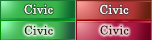
<style>
.page{position:relative;width:152px;height:40px}
.page>*{position:absolute;margin:0}
.t1{font:12px "CenturySchoolbook";letter-spacing:0.025em;color:#ffffff}
.t2{font:12px "CenturySchoolbook";letter-spacing:0.025em;color:#321a02}
</style>
<div class="page">
<p class="t1" style="left:24px;top:4px;width:29px;height:10px">Civic</p>
<p class="t1" style="left:100px;top:4px;width:29px;height:10px">Civic</p>
<p class="t2" style="left:24px;top:25px;width:29px;height:10px">Civic</p>
<p class="t2" style="left:100px;top:25px;width:29px;height:10px">Civic</p>
</div>
